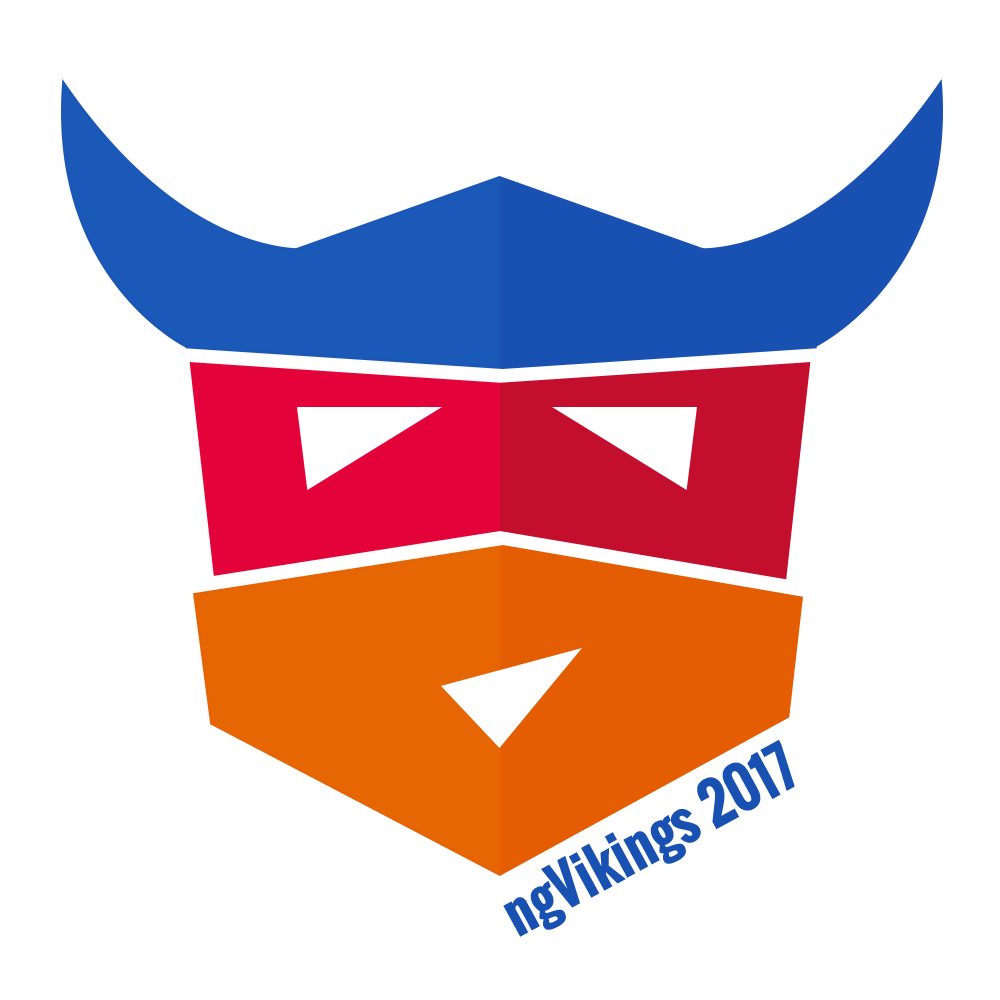
<style>
.page{position:relative;width:1000px;height:1000px;background:#ffffff}
.page>*{position:absolute;margin:0}
.t1{font:55.4px "Oswald-Bold";color:#1851b1}
</style>
<div class="page">
<p class="t1" style="left:503px;top:739px;width:292px;height:198px;rotate:-29deg">ngVikings 2017</p>
</div>
